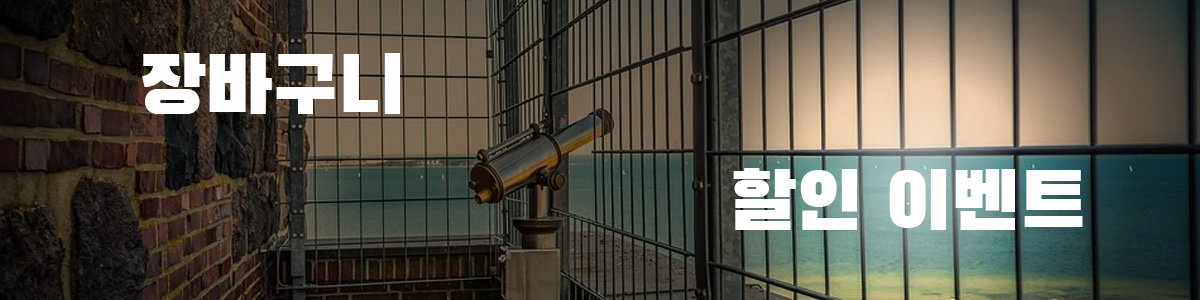
<style>
.page{position:relative;width:1200px;height:300px}
.page>*{position:absolute;margin:0}
.t1{font:80px "BlackHanSans-Regular";color:#fefefe}
</style>
<div class="page">
<p class="t1" style="left:142px;top:53px;width:258px;height:61px">장바구니</p>
<p class="t1" style="left:733px;top:168px;width:350px;height:62px">할인 이벤트</p>
</div>
